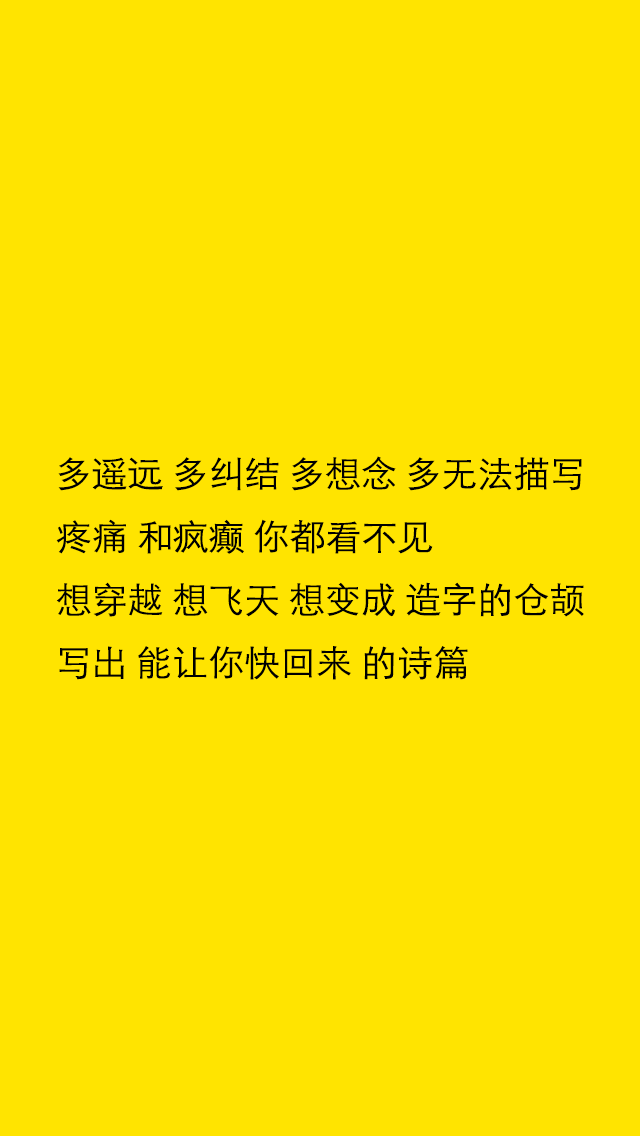
<style>
.page{position:relative;width:640px;height:1136px;background:#ffe400}
.page>*{position:absolute;margin:0}
.t1{font:36px "STHeitiSC-Light"}
.t2{font:36px "STHeitiSC-Light";color:#000000}
</style>
<div class="page">
<p class="t1" style="left:56px;top:456px;width:529px;height:224px">需要你 需要你 需要你 想逆转时间<br>回到 最开始 有你的世界<br>想穿越 想飞天 想变成 造字的仓颉<br>写出 让宇宙能重来 的诗篇</p>
<p class="t2" style="left:56px;top:456px;width:528px;height:224px">多遥远 多纠结 多想念 多无法描写<br>疼痛 和疯癫 你都看不见<br>想穿越 想飞天 想变成 造字的仓颉<br>写出 能让你快回来 的诗篇</p>
</div>
